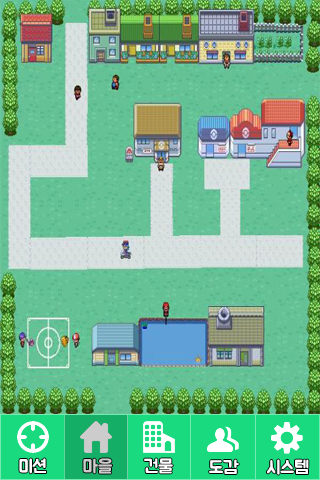
<style>
.page{position:relative;width:320px;height:480px}
.page>*{position:absolute;margin:0}
.t1{font:18px "BMJUA";color:#ffffff}
.t2{font:18px "BMJUA";color:#cccccc}
</style>
<div class="page">
<p class="t1" style="left:19px;top:458px;width:27px;height:16px">미션</p>
<p class="t2" style="left:83px;top:458px;width:29px;height:16px">마을</p>
<p class="t1" style="left:144px;top:458px;width:29px;height:16px">건물</p>
<p class="t1" style="left:209px;top:459px;width:30px;height:15px">도감</p>
<p class="t1" style="left:267px;top:459px;width:42px;height:16px">시스템</p>
</div>
